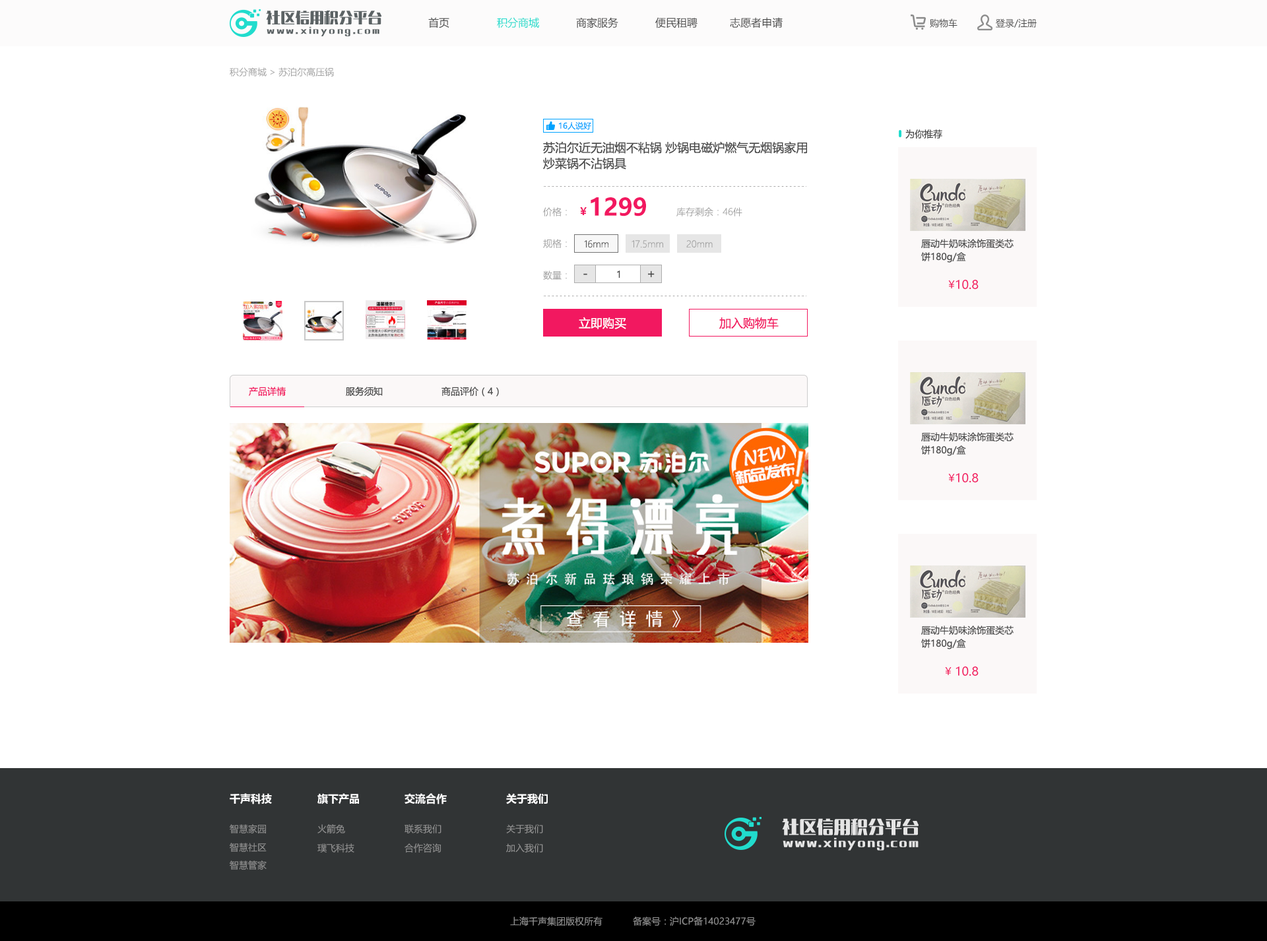
<style>
.page{position:relative;width:1267px;height:941px;background:#ffffff}
.page>*{position:absolute;margin:0}
.t1{font:14.5px "MFLangQian_Noncommercial-Bold";color:#5c6365}
.t2{font:10.6px "MicrosoftYaHei";color:#4a4a4a}
.t3{font:10.6px "MicrosoftYaHei";color:#21dccd}
.t4{font:7.9px "MFLangQian_Noncommercial-Bold";letter-spacing:0.22em;color:#5c6365}
.t5{font:9.2px "MicrosoftYaHei";color:#4a4a4a}
.t6{font:9.2px "MicrosoftYaHeiLight";color:#a2a2a2}
.t7{font:7.9px "MicrosoftYaHei";color:#00a2ff}
.t8{font:11.9px/15.8px "MicrosoftYaHei";color:#4a4a4a}
.t9{font:23.8px "MicrosoftYaHei-Bold";color:#f21860}
.t10{font:9.2px "MicrosoftYaHeiLight";color:#a1a1a1}
.t11{font:10.6px "MicrosoftYaHei-Bold";color:#f21860}
.t12{font:9.2px "MicrosoftYaHeiLight";color:#4a4a4a}
.t13{font:9.2px/13.2px "MicrosoftYaHei";color:#4a4a4a}
.t14{font:11.9px "MicrosoftYaHei";color:#4a4a4a}
.t15{font:10.6px "MicrosoftYaHei";color:#f21860}
.t16{font:11.9px "MicrosoftYaHei";color:#f21860}
.t17{font:11.9px "MicrosoftYaHei";color:#ffffff}
.t18{font:9.2px "MicrosoftYaHei";color:#f21860}
.t19{font:10.6px "MicrosoftYaHei-Bold";color:#ffffff}
.t20{font:17.2px "MFLangQian_Noncommercial-Bold";color:#e5e5e5}
.t21{font:9.2px "MicrosoftYaHei";color:#929292}
.t22{font:10.6px "MFLangQian_Noncommercial-Bold";letter-spacing:0.12em;color:#e5e5e5}
</style>
<div class="page">
<p class="t1" style="left:266px;top:11px;width:116px;height:13px">社区信用积分平台</p>
<p class="t2" style="left:428px;top:17px;width:21px;height:11px">首页</p>
<p class="t3" style="left:497px;top:17px;width:42px;height:11px">积分商城</p>
<p class="t2" style="left:576px;top:17px;width:42px;height:11px">商家服务</p>
<p class="t2" style="left:655px;top:17px;width:43px;height:11px">便民租聘</p>
<p class="t2" style="left:730px;top:17px;width:53px;height:11px">志愿者申请</p>
<p class="t4" style="left:267px;top:26px;width:112px;height:10px">www.xinyong.com</p>
<p class="t5" style="left:930px;top:18px;width:28px;height:10px">购物车</p>
<p class="t5" style="left:996px;top:18px;width:41px;height:10px">登录/注册</p>
<p class="t6" style="left:230px;top:67px;width:104px;height:10px">积分商城 &gt; 苏泊尔高压锅</p>
<p class="t7" style="left:559px;top:121px;width:32px;height:9px">16人说好</p>
<p class="t5" style="left:905px;top:129px;width:37px;height:10px">为你推荐</p>
<p class="t8" style="left:543px;top:141px;width:264px;height:29px;text-align:justify">苏泊尔近无油烟不粘锅 炒锅电磁炉燃气无烟锅家用<br>炒菜锅不沾锅具</p>
<p class="t9" style="left:591px;top:197px;width:55px;height:19px">1299</p>
<p class="t10" style="left:543px;top:207px;width:24px;height:9px">价格：</p>
<p class="t11" style="left:580px;top:207px;width:7px;height:8px">￥</p>
<p class="t10" style="left:676px;top:207px;width:66px;height:9px">库存剩余：46件</p>
<p class="t10" style="left:543px;top:239px;width:24px;height:9px">规格：</p>
<p class="t12" style="left:584px;top:240px;width:24px;height:8px">16mm</p>
<p class="t10" style="left:632px;top:240px;width:31px;height:8px">17.5mm</p>
<p class="t10" style="left:686px;top:240px;width:27px;height:8px">20mm</p>
<p class="t13" style="left:921px;top:239px;width:93px;height:24px;text-align:justify">唇动牛奶味涂饰蛋类芯<br>饼180g/盒</p>
<p class="t10" style="left:543px;top:271px;width:24px;height:9px">数量：</p>
<p class="t14" style="left:583px;top:273px;width:4px;height:2px">-</p>
<p class="t5" style="left:617px;top:271px;width:3px;height:7px">1</p>
<p class="t14" style="left:648px;top:271px;width:7px;height:6px">+</p>
<p class="t15" style="left:948px;top:280px;width:7px;height:8px">￥</p>
<p class="t16" style="left:956px;top:280px;width:23px;height:9px">10.8</p>
<p class="t17" style="left:579px;top:317px;width:47px;height:12px">立即购买</p>
<p class="t16" style="left:719px;top:317px;width:60px;height:12px">加入购物车</p>
<p class="t18" style="left:249px;top:387px;width:37px;height:9px">产品详情</p>
<p class="t5" style="left:346px;top:387px;width:37px;height:9px">服务须知</p>
<p class="t5" style="left:442px;top:387px;width:57px;height:10px">商品评价（4）</p>
<p class="t13" style="left:921px;top:432px;width:93px;height:24px;text-align:justify">唇动牛奶味涂饰蛋类芯<br>饼180g/盒</p>
<p class="t15" style="left:948px;top:474px;width:7px;height:8px">￥</p>
<p class="t16" style="left:956px;top:473px;width:23px;height:9px">10.8</p>
<p class="t13" style="left:921px;top:626px;width:93px;height:23px;text-align:justify">唇动牛奶味涂饰蛋类芯<br>饼180g/盒</p>
<p class="t15" style="left:945px;top:667px;width:7px;height:8px">￥</p>
<p class="t16" style="left:956px;top:667px;width:23px;height:9px">10.8</p>
<p class="t19" style="left:230px;top:793px;width:42px;height:11px">千声科技</p>
<p class="t19" style="left:317px;top:793px;width:42px;height:11px">旗下产品</p>
<p class="t19" style="left:405px;top:793px;width:42px;height:11px">交流合作</p>
<p class="t19" style="left:506px;top:793px;width:42px;height:11px">关于我们</p>
<p class="t20" style="left:782px;top:818px;width:137px;height:17px">社区信用积分平台</p>
<p class="t21" style="left:230px;top:824px;width:36px;height:10px">智慧家园</p>
<p class="t21" style="left:317px;top:824px;width:28px;height:10px">火箭兔</p>
<p class="t21" style="left:405px;top:824px;width:37px;height:10px">联系我们</p>
<p class="t21" style="left:506px;top:824px;width:37px;height:10px">关于我们</p>
<p class="t21" style="left:230px;top:843px;width:37px;height:9px">智慧社区</p>
<p class="t21" style="left:317px;top:843px;width:37px;height:10px">璞飞科技</p>
<p class="t21" style="left:405px;top:843px;width:37px;height:10px">合作咨询</p>
<p class="t21" style="left:506px;top:843px;width:37px;height:10px">加入我们</p>
<p class="t22" style="left:783px;top:837px;width:136px;height:14px">www.xinyong.com</p>
<p class="t21" style="left:230px;top:861px;width:37px;height:9px">智慧管家</p>
<p class="t21" style="left:510px;top:917px;width:93px;height:9px">上海千声集团版权所有</p>
<p class="t21" style="left:633px;top:917px;width:123px;height:9px">备案号：沪ICP备14023477号</p>
</div>
